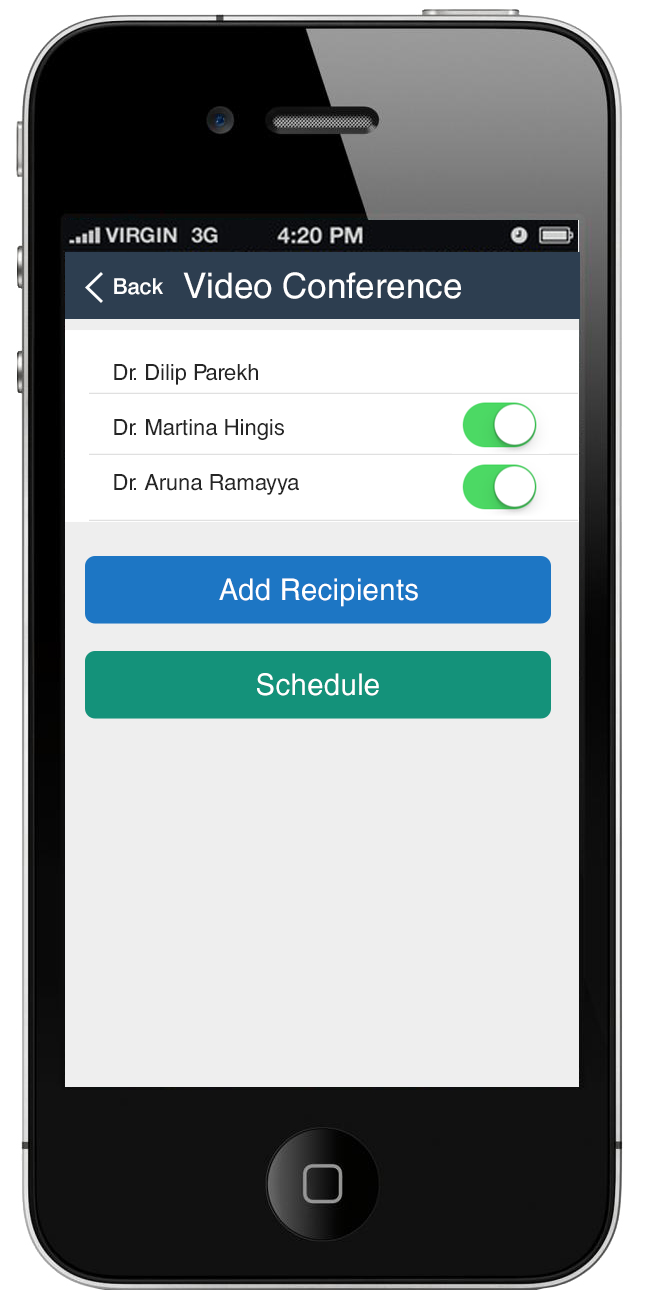
<style>
.page{position:relative;width:648px;height:1300px;background:#eeeeee}
.page>*{position:absolute;margin:0}
.t1{font:22px "Swiss721BT-Medium";color:#ffffff}
.t2{font:35px "HelveticaLT";color:#ffffff}
.t3{font:22px/55px "HelveticaCE-Regular";color:#252525}
.t4{font:30px "HelveticaCyr-Upright";color:#ffffff}
</style>
<div class="page">
<p class="t1" style="left:114px;top:278px;width:49px;height:17px">Back</p>
<p class="t2" style="left:183px;top:272px;width:278px;height:27px">Video Conference</p>
<p class="t3" style="left:114px;top:364px;width:185px;height:131px">Dr. Dilip Parekh<br>Dr. Martina Hingis<br>Dr. Aruna Ramayya</p>
<p class="t4" style="left:219px;top:578px;width:199px;height:29px">Add Recipients</p>
<p class="t4" style="left:257px;top:673px;width:122px;height:23px">Schedule</p>
</div>
